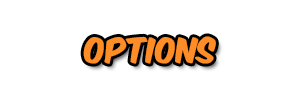
<style>
.page{position:relative;width:300px;height:100px;background:#ffffff}
.page>*{position:absolute;margin:0}
.t1{font:30px "KomikaAxis";color:#ff8d27}
</style>
<div class="page">
<p class="t1" style="left:83px;top:36px;width:133px;height:28px">OPTIONS</p>
</div>
